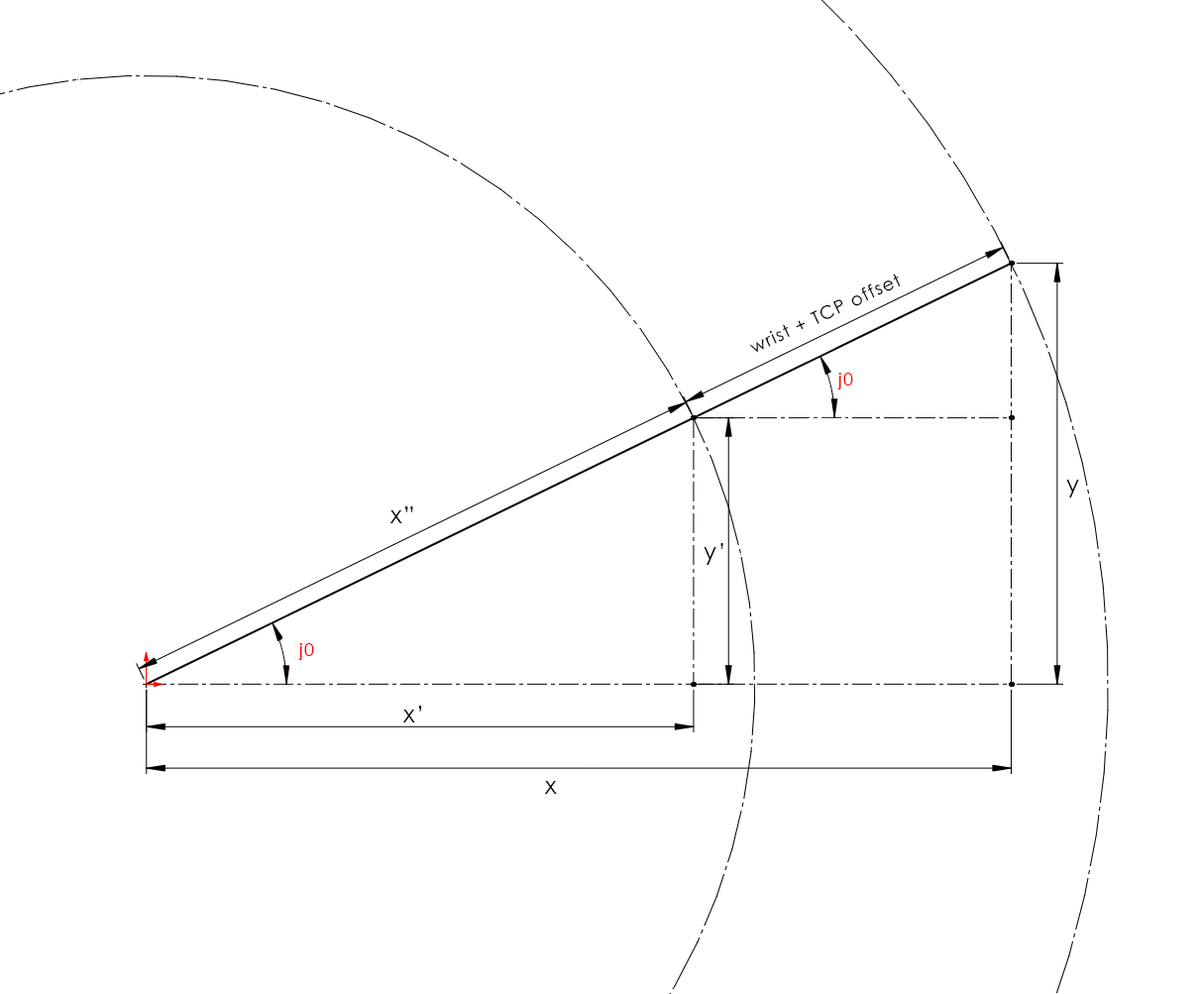
<style>
.page{position:relative;width:1200px;height:994px;background:#ffffff}
.page>*{position:absolute;margin:0}
.t1{font:17.8px "CenturyGothic";letter-spacing:0.07em;color:#000000}
.t2{font:17.8px "CenturyGothic";letter-spacing:0.07em;color:#ff0000}
.t3{font:23.8px "CenturyGothic";letter-spacing:0.07em;color:#000000}
</style>
<div class="page">
<p class="t1" style="left:749px;top:273px;width:152px;height:80px;rotate:-25deg">wrist + TCP offset</p>
<p class="t2" style="left:837px;top:373px;width:16px;height:16px">j0</p>
<p class="t3" style="left:1066px;top:480px;width:13px;height:17px">y</p>
<p class="t3" style="left:390px;top:506px;width:23px;height:17px">x”</p>
<p class="t3" style="left:703px;top:543px;width:20px;height:22px">y’</p>
<p class="t2" style="left:298px;top:643px;width:16px;height:17px">j0</p>
<p class="t3" style="left:403px;top:705px;width:19px;height:17px">x’</p>
<p class="t3" style="left:545px;top:781px;width:12px;height:13px">x</p>
</div>
